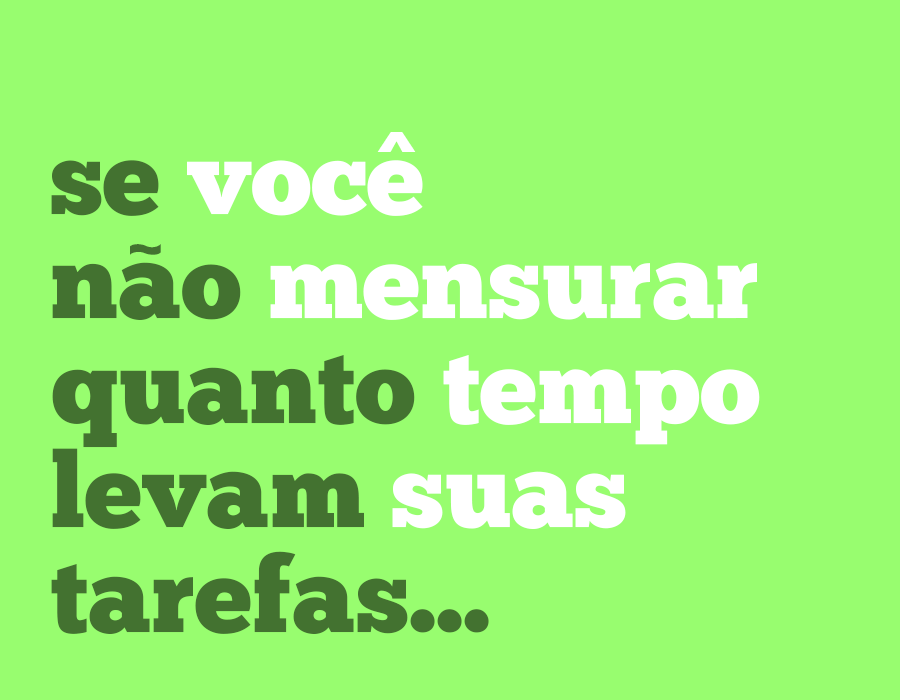
<style>
.page{position:relative;width:900px;height:700px;background:#98fd6f}
.page>*{position:absolute;margin:0}
.t1{font:66.2px "MEgalopolisExtra";color:#ffffff}
.t2{font:104.5px/104.5px "ChunkFive-Roman";color:#437230}
.t3{font:104.5px/104.5px "ChunkFive-Roman";color:#ffffff}
.t4{font:77.1px "ChunkFive-Roman";color:#437230}
</style>
<div class="page">
<p class="t1" style="left:377px;top:132px;width:39px;height:20px">^</p>
<p class="t2" style="left:51px;top:160px;width:709px;height:474px">se <span class="t3">voce<br></span>nao <span class="t3">mensurar<br></span>quanto <span class="t3">tempo<br></span>levam <span class="t3">suas<br></span>tarefas...</p>
<p class="t4" style="left:130px;top:244px;width:31px;height:11px">~</p>
</div>
